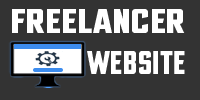
<style>
.page{position:relative;width:200px;height:100px;background:#333333}
.page>*{position:absolute;margin:0}
.t1{font:32.4px "CCUltimatum-Heavy";color:#ffffff}
.t2{font:30.8px "CCUltimatum-Heavy";color:#ffffff;scale:0.81 1}
</style>
<div class="page">
<p class="t1" style="left:12px;top:9px;width:173px;height:24px">FREELANCER</p>
<p class="t2" style="left:87px;top:51px;width:98px;height:23px">WEBSITE</p>
</div>
